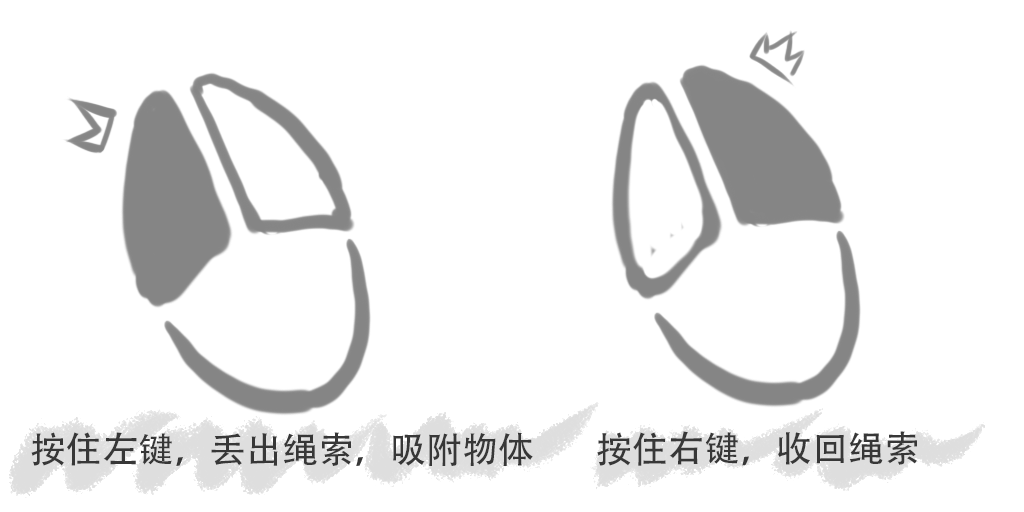
<style>
.page{position:relative;width:1024px;height:512px;background:#ffffff}
.page>*{position:absolute;margin:0}
.t1{font:36px "AdobeHeitiStd-Regular";color:#373737}
</style>
<div class="page">
<p class="t1" style="left:31px;top:432px;width:502px;height:34px">按住左键，丢出绳索，吸附物体</p>
<p class="t1" style="left:597px;top:431px;width:320px;height:35px">按住右键，收回绳索</p>
</div>
